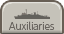
<style>
.page{position:relative;width:64px;height:34px;background:#c5c2b9}
.page>*{position:absolute;margin:0}
.t1{font:10px "UDShinGoPro-Light";color:#6a6560;scale:0.9 1}
</style>
<div class="page">
<p class="t1" style="left:9px;top:21px;width:46px;height:9px">Auxiliaries</p>
</div>
